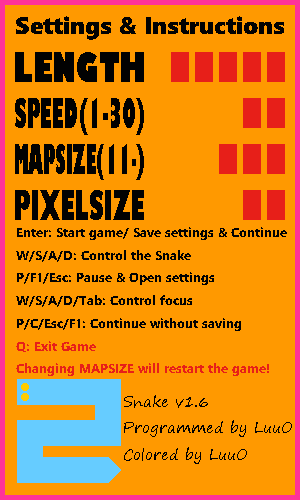
<style>
.page{position:relative;width:300px;height:500px;background:#ff9900}
.page>*{position:absolute;margin:0}
.t1{font:24px "SegoeWP-Black";color:#020202}
.t2{font:13px "SegoeWP-Bold";color:#020202}
.t3{font:13px "SegoeWP-Bold";color:#e71f19}
.t4{font:15px "SegoePrint";color:#020202}
</style>
<div class="page">
<p class="t1" style="left:16px;top:16px;width:268px;height:24px">Settings &amp; Instructions</p>
<p class="t2" style="left:16px;top:227px;width:271px;height:149px">Enter: Start game/ Save settings &amp; Continue<br>W/S/A/D: Control the Snake<br>P/F1/Esc: Pause &amp; Open settings<br>W/S/A/D/Tab: Control focus<br>P/C/Esc/F1: Continue without saving<br><span class="t3">Q: Exit Game<br>Changing MAPSIZE will restart the game!</span></p>
<p class="t4" style="left:124px;top:395px;width:168px;height:69px">Snake v1.6<br>Programmed by LuuO<br>Colored by LuuO</p>
</div>
